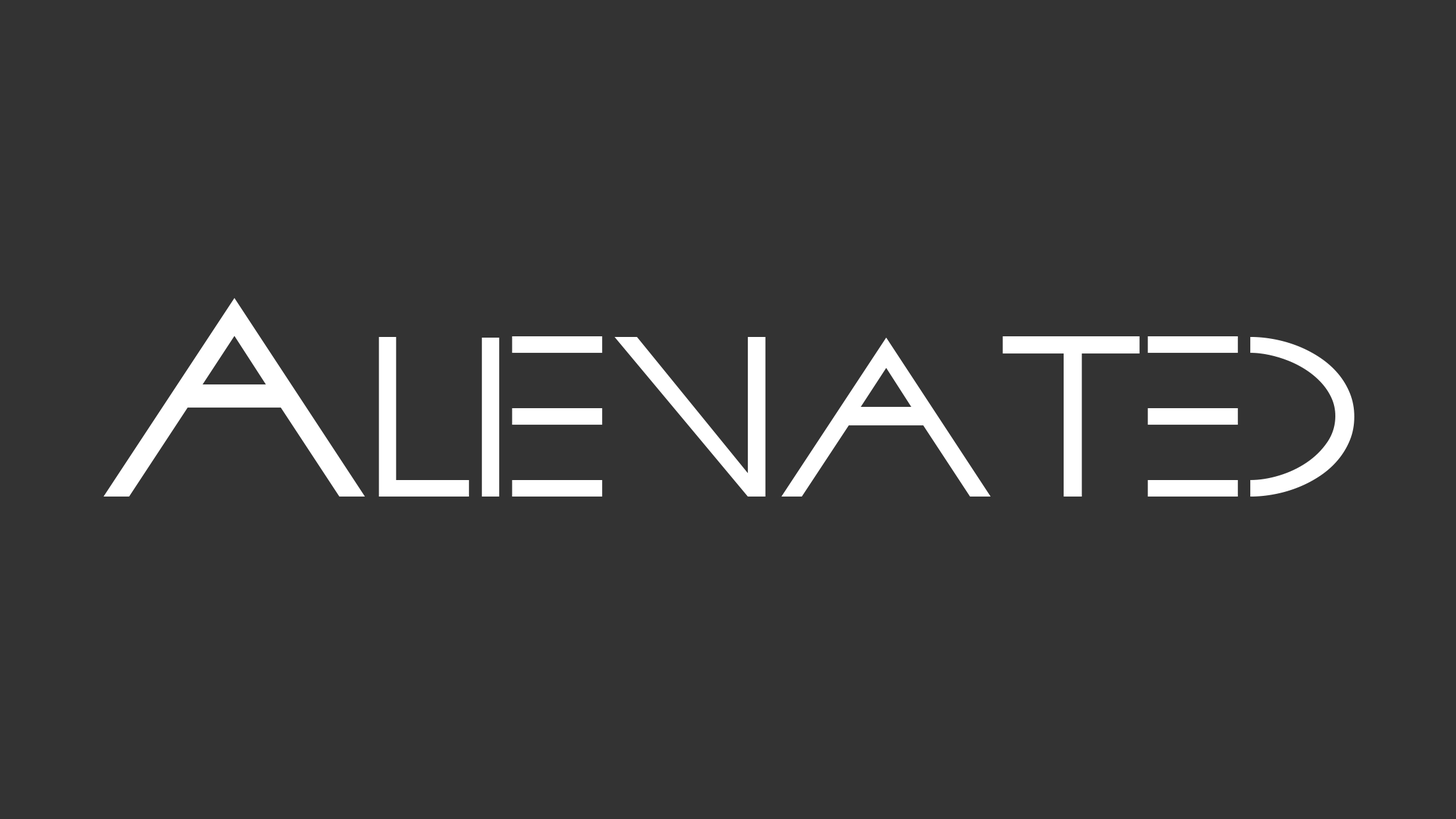
<style>
.page{position:relative;width:1456px;height:819px;background:#333333}
.page>*{position:absolute;margin:0}
.t1{font:198.9px "PROMETHEUS";color:#ffffff}
</style>
<div class="page">
<p class="t1" style="left:104px;top:298px;width:1250px;height:199px">Alienated</p>
</div>
